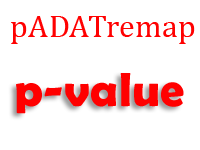
<style>
.page{position:relative;width:200px;height:150px;background:#ffffff}
.page>*{position:absolute;margin:0}
.t1{font:32px "Cambria";letter-spacing:0.01em;color:#ff0101}
.t2{font:48px "BerlinSansFBDemi-Bold";letter-spacing:0.01em;color:#ff0000}
</style>
<div class="page">
<p class="t1" style="left:11px;top:16px;width:184px;height:28px">pADATremap</p>
<p class="t2" style="left:16px;top:73px;width:168px;height:41px">p-value</p>
</div>
